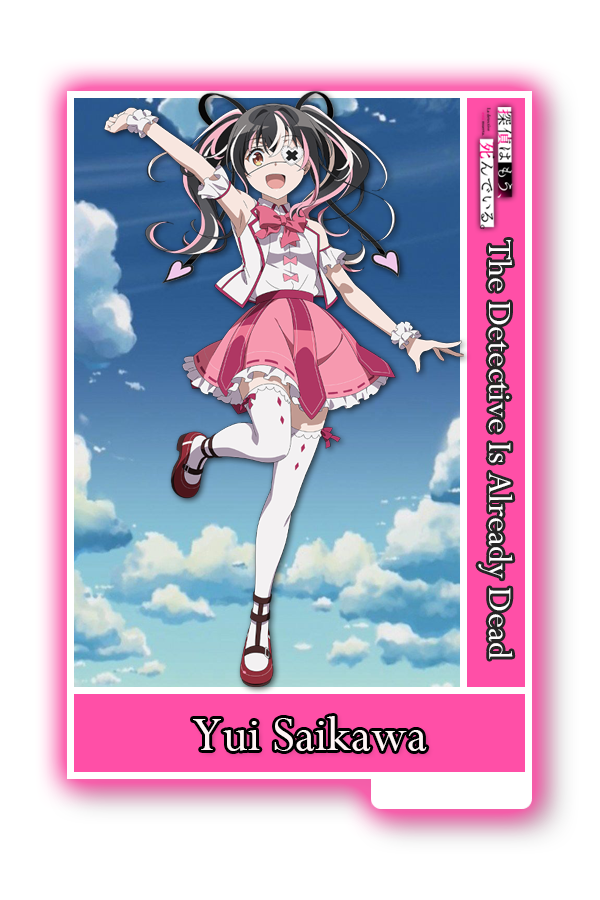
<style>
.page{position:relative;width:600px;height:900px;background:#ffffff}
.page>*{position:absolute;margin:0}
.t1{font:36.5px "Perpetua";color:#ffffff;scale:1.04 1}
.t2{font:54.2px "Perpetua";color:#fff5f5}
</style>
<div class="page">
<p class="t1" style="left:478px;top:240px;width:35px;height:419px;rotate:90deg">The Detective Is Already Dead</p>
<p class="t2" style="left:193px;top:716px;width:234px;height:35px">Yui Saikawa</p>
</div>
